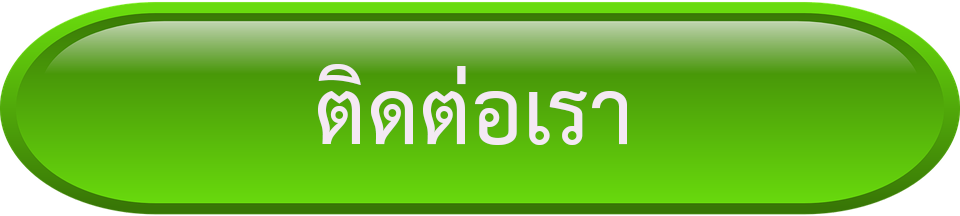
<style>
.page{position:relative;width:960px;height:216px}
.page>*{position:absolute;margin:0}
.t1{font:130px "THSarabunNew-Bold";color:#f4e9f3}
</style>
<div class="page">
<p class="t1" style="left:318px;top:64px;width:309px;height:81px">ติดต่อเรา</p>
</div>
